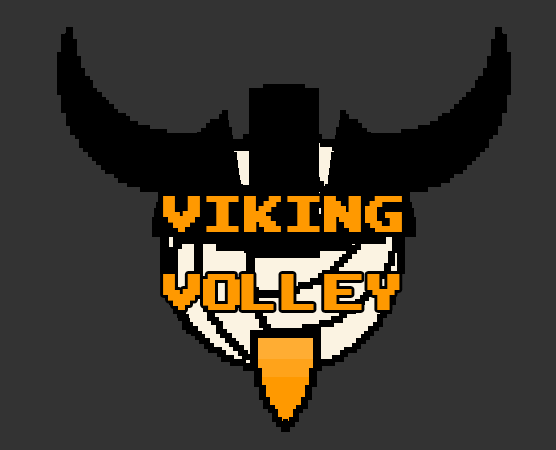
<style>
.page{position:relative;width:556px;height:450px;background:#333333}
.page>*{position:absolute;margin:0}
.t1{font:70px "ArcadeClassic";color:#ff9900;font-weight:bold}
</style>
<div class="page">
<p class="t1" style="left:163px;top:196px;width:239px;height:114px;text-align:center">Viking<br>Volley</p>
</div>
